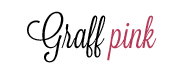
<style>
.page{position:relative;width:186px;height:72px;background:#ffffff}
.page>*{position:absolute;margin:0}
.t1{font:41px "Lavanderia-Regular";color:#000000}
.t2{font:41px "Lavanderia-Regular";color:#b73958}
</style>
<div class="page">
<p class="t1" style="left:27px;top:11px;width:130px;height:52px">Graff <span class="t2">pink</span></p>
</div>
